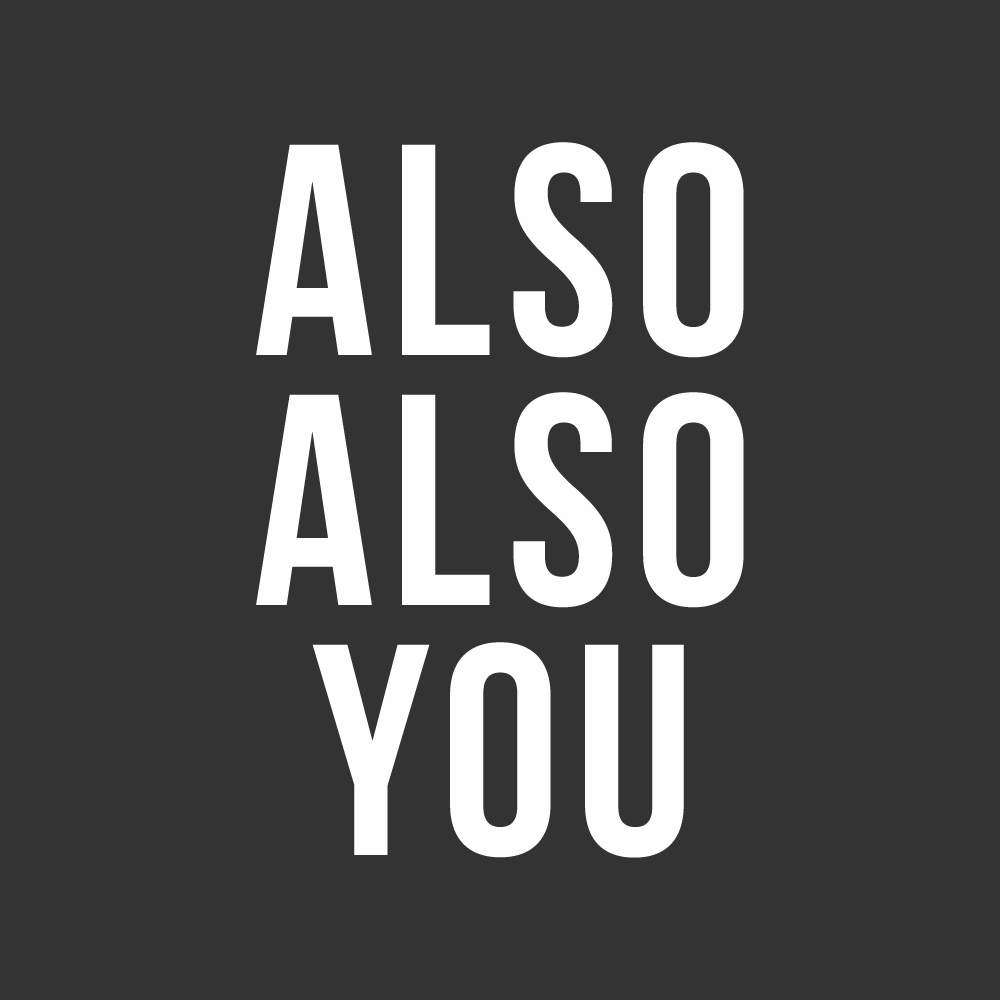
<style>
.page{position:relative;width:1000px;height:1000px;background:#333333}
.page>*{position:absolute;margin:0}
.t1{font:300px/250px "BebasNeue";letter-spacing:0.05em;color:#fefefe}
</style>
<div class="page">
<p class="t1" style="left:256px;top:142px;width:488px;height:716px;text-align:center">also<br>also<br>you</p>
</div>
